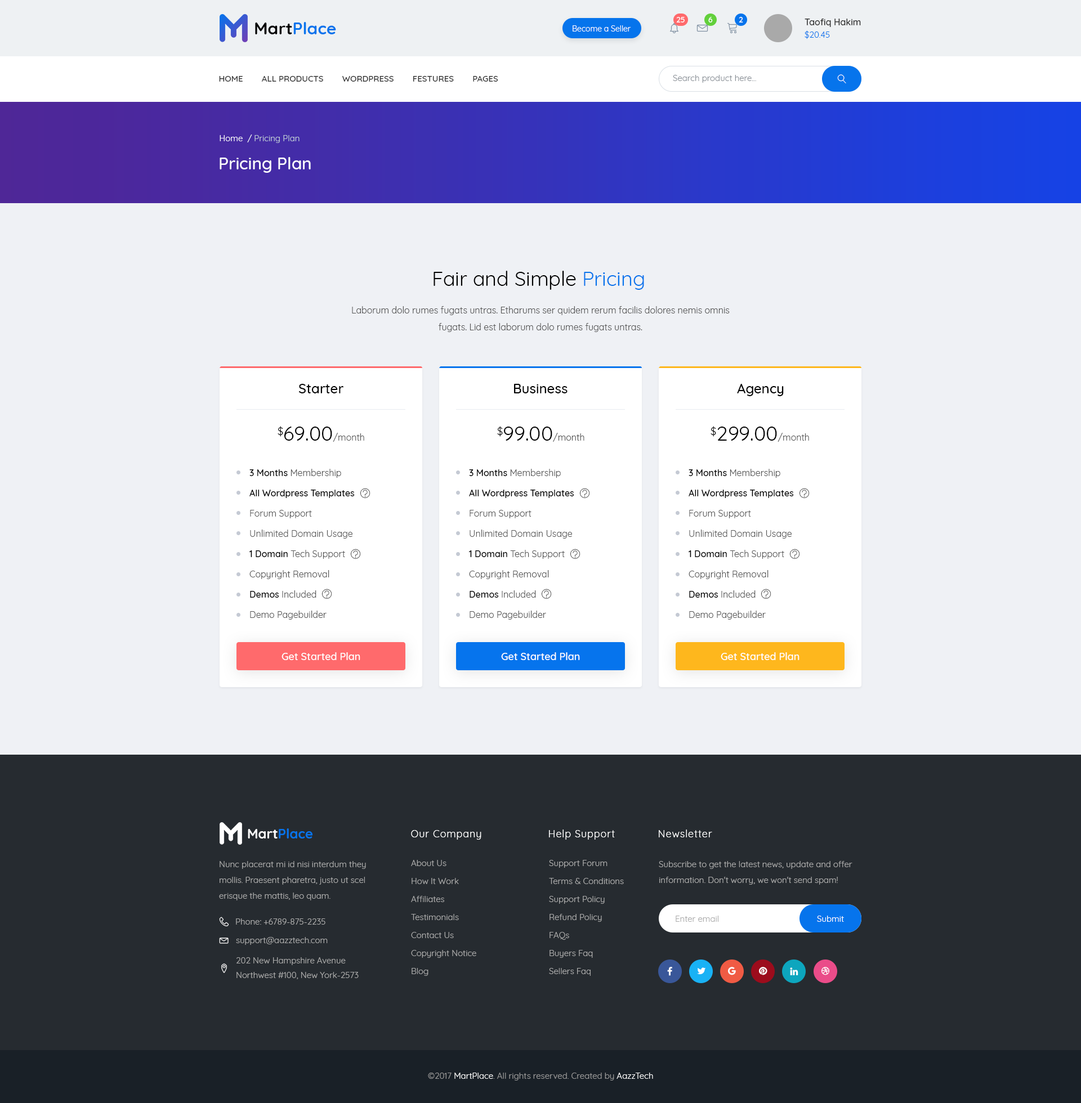
<style>
.page{position:relative;width:1081px;height:1103px;background:#eff1f5}
.page>*{position:absolute;margin:0}
.t1{font:7.9px "Quicksand-Medium";color:#ffffff;text-transform:uppercase}
.t2{font:16.9px "Quicksand-Bold";color:#0674ec}
.t3{font:16.9px "Quicksand-Bold";color:#000000}
.t4{font:7.9px "Quicksand-Regular";color:#ffffff}
.t5{font:9px/12.4px "Quicksand-Medium";color:#333333}
.t6{font:8.4px/12.4px "Quicksand-Regular";color:#0674ec}
.t7{font:8.4px "Quicksand-Medium";color:#333333;text-transform:uppercase}
.t8{font:8.4px "Quicksand-Regular";color:#898f96}
.t9{font:8.4px "Quicksand-Regular";color:#bfcad7}
.t10{font:8.4px "Quicksand-Regular";color:#ffffff}
.t11{font:16.9px "Quicksand-Medium";color:#ffffff}
.t12{font:20.3px "Quicksand-Regular";color:#000000}
.t13{font:20.3px "Quicksand-Regular";color:#0674ec}
.t14{font:9px/16.9px "Quicksand-Regular";color:#555555}
.t15{font:13.5px "Quicksand-Medium";color:#000000}
.t16{font:9px "Quicksand-Regular";color:#555555}
.t17{font:10.1px "Quicksand-Regular";color:#000000}
.t18{font:9px/20.3px "Quicksand-Regular";color:#555555}
.t19{font:9px/20.3px "Quicksand-Medium";color:#000000}
.t20{font:10.1px "Quicksand-Medium";color:#ffffff}
.t21{font:13.5px "Quicksand-Bold";color:#0674ec}
.t22{font:13.5px "Quicksand-Bold";color:#ffffff}
.t23{font:10.1px "Quicksand-Regular";letter-spacing:0.05em;color:#ffffff}
.t24{font:8.4px/15.8px "Quicksand-Regular";color:#ababab}
.t25{font:8.4px/18px "Quicksand-Regular";color:#ababab}
.t26{font:8.4px "Quicksand-Regular";color:#ababab}
.t27{font:8.4px/14.6px "Quicksand-Regular";color:#ababab}
.t28{font:8.4px "Quicksand-Regular";color:#999999}
</style>
<div class="page">
<p class="t1" style="left:676px;top:17px;width:8px;height:6px">25</p>
<p class="t1" style="left:708px;top:17px;width:5px;height:6px">6</p>
<p class="t1" style="left:739px;top:17px;width:4px;height:6px">2</p>
<p class="t2" style="left:255px;top:22px;width:81px;height:12px"><span class="t3">Mart</span>Place</p>
<p class="t4" style="left:572px;top:25px;width:59px;height:7px">Become a Seller</p>
<p class="t5" style="left:804px;top:19px;width:57px;height:20px">Taofiq Hakim<br><span class="t6">$20.45</span></p>
<p class="t7" style="left:219px;top:76px;width:279px;height:6px">HOME        all products        wordpress        festures        Pages</p>
<p class="t8" style="left:673px;top:75px;width:83px;height:8px">Search product here...</p>
<p class="t9" style="left:220px;top:135px;width:79px;height:8px"><span class="t10">Home  / </span>Pricing Plan</p>
<p class="t11" style="left:220px;top:157px;width:91px;height:16px">Pricing Plan</p>
<p class="t12" style="left:433px;top:271px;width:211px;height:19px">Fair and Simple <span class="t13">Pricing</span></p>
<p class="t14" style="left:352px;top:306px;width:378px;height:26px;text-align:center">Laborum dolo rumes fugats untras. Etharums ser quidem rerum facilis dolores nemis omnis fugats. Lid est laborum dolo rumes fugats untras.</p>
<p class="t15" style="left:298px;top:384px;width:45px;height:9px">Starter</p>
<p class="t15" style="left:514px;top:384px;width:53px;height:9px">Business</p>
<p class="t15" style="left:737px;top:384px;width:47px;height:12px">Agency</p>
<p class="t16" style="left:278px;top:426px;width:86px;height:16px"><span class="t17">$</span><span class="t12">69.00</span>/month</p>
<p class="t16" style="left:497px;top:426px;width:87px;height:16px"><span class="t17">$</span><span class="t12">99.00</span>/month</p>
<p class="t12" style="left:710px;top:426px;width:99px;height:16px"><span class="t17">$</span>299.00<span class="t16">/month</span></p>
<p class="t18" style="left:249px;top:469px;width:106px;height:151px"><span class="t19">3 Months</span> Membership<br><span class="t19">All Wordpress Templates<br></span>Forum Support<br>Unlimited Domain Usage<br><span class="t19">1 Domain</span> Tech Support<br>Copyright Removal<br><span class="t19">Demos</span> Included<br>Demo Pagebuilder</p>
<p class="t18" style="left:469px;top:469px;width:105px;height:151px"><span class="t19">3 Months</span> Membership<br><span class="t19">All Wordpress Templates<br></span>Forum Support<br>Unlimited Domain Usage<br><span class="t19">1 Domain</span> Tech Support<br>Copyright Removal<br><span class="t19">Demos</span> Included<br>Demo Pagebuilder</p>
<p class="t18" style="left:688px;top:469px;width:106px;height:151px"><span class="t19">3 Months</span> Membership<br><span class="t19">All Wordpress Templates<br></span>Forum Support<br>Unlimited Domain Usage<br><span class="t19">1 Domain</span> Tech Support<br>Copyright Removal<br><span class="t19">Demos</span> Included<br>Demo Pagebuilder</p>
<p class="t20" style="left:281px;top:652px;width:79px;height:8px">Get Started Plan</p>
<p class="t20" style="left:501px;top:652px;width:79px;height:8px">Get Started Plan</p>
<p class="t20" style="left:721px;top:652px;width:78px;height:8px">Get Started Plan</p>
<p class="t21" style="left:248px;top:829px;width:65px;height:10px"><span class="t22">Mart</span>Place</p>
<p class="t23" style="left:411px;top:830px;width:70px;height:10px">Our Company</p>
<p class="t23" style="left:549px;top:830px;width:66px;height:10px">Help Support</p>
<p class="t23" style="left:659px;top:830px;width:53px;height:8px">Newsletter</p>
<p class="t24" style="left:219px;top:861px;width:147px;height:40px">Nunc placerat mi id nisi interdum they mollis. Praesent pharetra, justo ut scel erisque the mattis, leo quam.</p>
<p class="t25" style="left:411px;top:860px;width:65px;height:116px">About Us<br>How It Work<br>Affiliates<br>Testimonials<br>Contact Us<br>Copyright Notice<br>Blog</p>
<p class="t25" style="left:549px;top:860px;width:75px;height:116px">Support Forum<br>Terms &amp; Conditions<br>Support Policy<br>Refund Policy<br>FAQs<br>Buyers Faq<br>Sellers Faq</p>
<p class="t24" style="left:659px;top:861px;width:193px;height:24px">Subscribe to get the latest news, update and offer information. Don't worry, we won't send spam!</p>
<p class="t26" style="left:675px;top:916px;width:43px;height:6px">Enter email</p>
<p class="t10" style="left:817px;top:916px;width:27px;height:6px">Submit</p>
<p class="t26" style="left:236px;top:919px;width:89px;height:6px">Phone: +6789-875-2235</p>
<p class="t26" style="left:236px;top:937px;width:92px;height:8px">support@aazztech.com</p>
<p class="t27" style="left:236px;top:958px;width:123px;height:21px">202 New Hampshire Avenue<br>Northwest #100, New York-2573</p>
<p class="t28" style="left:428px;top:1073px;width:225px;height:8px">©2017 <span class="t10">MartPlace</span>. All rights reserved. Created by <span class="t10">AazzTech</span></p>
</div>
